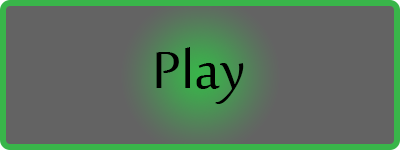
<style>
.page{position:relative;width:400px;height:150px;background:#636363}
.page>*{position:absolute;margin:0}
.t1{font:72px "SakkalMajalla";color:#000000}
</style>
<div class="page">
<p class="t1" style="left:156px;top:47px;width:88px;height:57px">Play</p>
</div>
